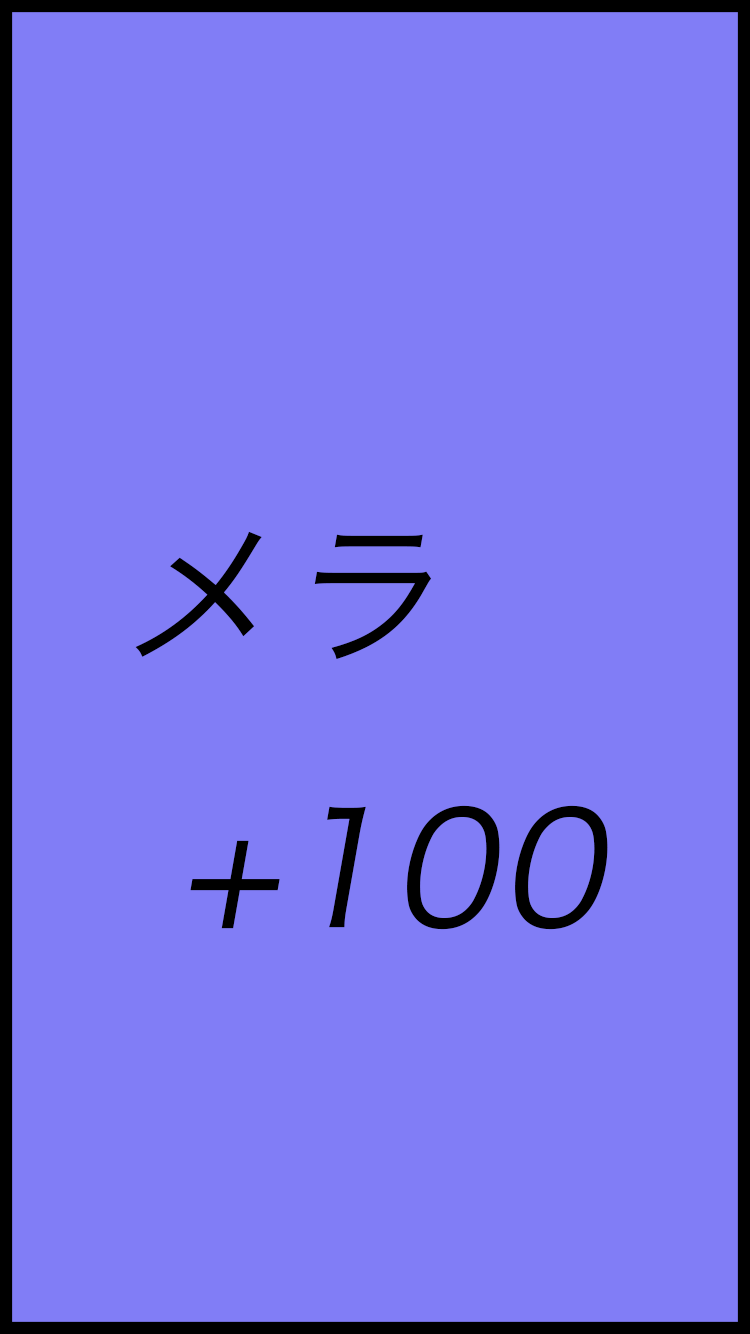
<style>
.page{position:relative;width:750px;height:1334px;background:#817df6}
.page>*{position:absolute;margin:0}
.t1{font:156.9px "HiraKakuPro-W3";color:#000000;font-weight:bold;font-style:italic}
</style>
<div class="page">
<p class="t1" style="left:135px;top:531px;width:473px;height:399px">メラ<br> +100</p>
</div>
